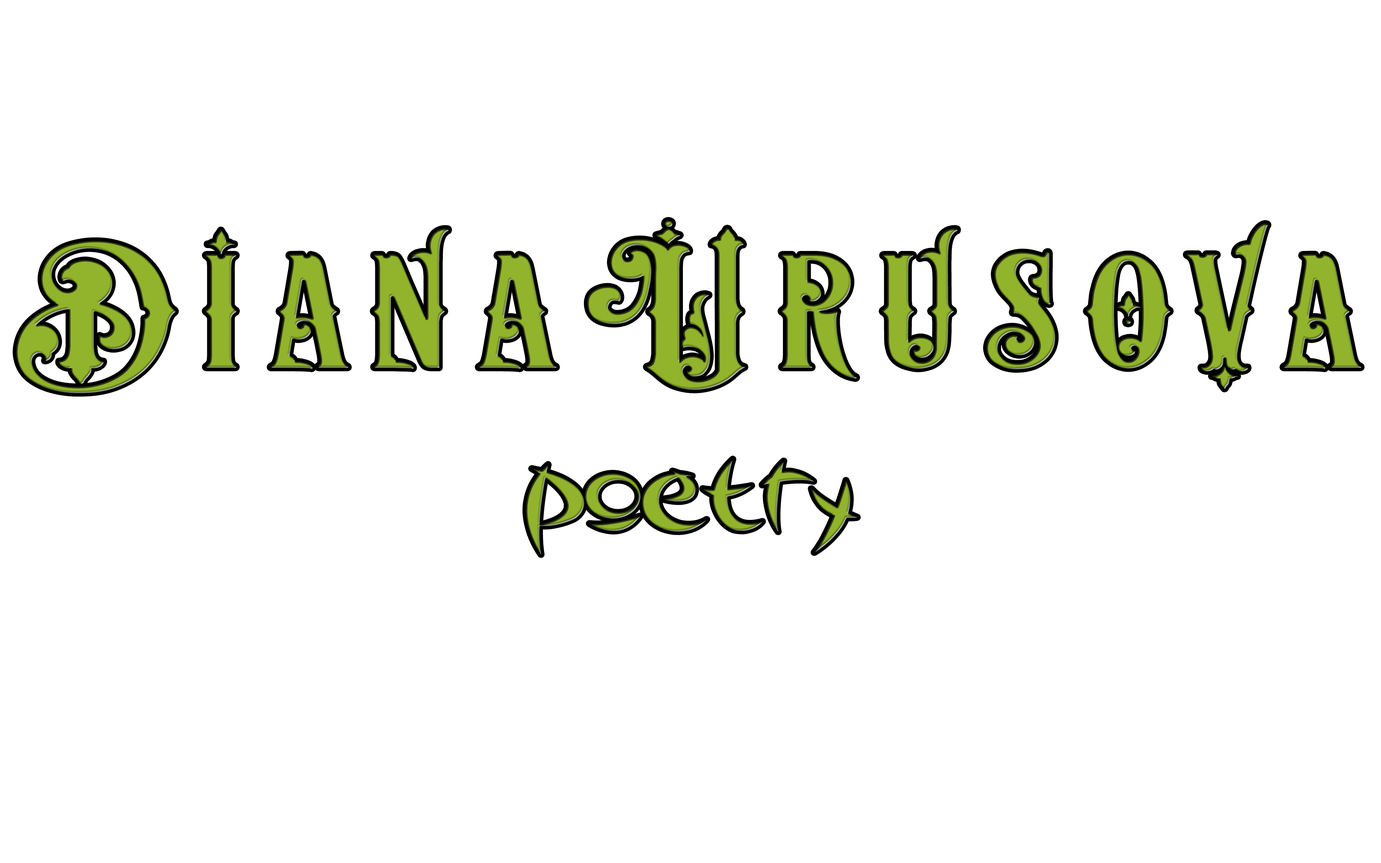
<style>
.page{position:relative;width:1381px;height:863px;background:#ffffff}
.page>*{position:absolute;margin:0}
.t1{font:189.9px "NocturneVictorian";letter-spacing:0.1em;color:#92b42c;scale:1.23 1}
.t2{font:189.9px "NocturneVictorian";letter-spacing:0.01em;color:#92b42c;scale:1.23 1}
.t3{font:114px "Outsiders";letter-spacing:0.01em;color:#92b42c;scale:1.23 1}
.t4{font:189.9px "NocturneVictorian";letter-spacing:0.01em;color:#92b42c;scale:0.91 1}
</style>
<div class="page">
<p class="t1" style="left:16px;top:220px;width:1346px;height:173px"><span class="t2"><br><br><br><br><br><br><br><br><br><br><br><br><br><br><br><br><br><br><br><br><br><br><br><br><br><br><br><br><br><br><br><br><br><br><br><br><br><br><br><br><br><br><br><br></span>DianaUrusova</p>
<p class="t3" style="left:526px;top:459px;width:332px;height:96px"><span class="t4"><br><br><br><br><br><br><br><br><br><br><br><br><br><br><br><br><br><br><br><br><br><br><br><br><br><br><br><br><br><br><br><br><br><br><br><br><br><br><br><br><br><br><br><br><br><br><br><br><br><br><br><br><br><br><br><br><br><br><br><br><br><br><br><br></span><br><br>poetry</p>
</div>
